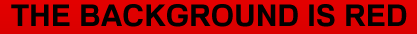
<style>
.page{position:relative;width:417px;height:34px;background:#010101}
.page>*{position:absolute;margin:0}
.t1{font:30px "FamiliarPro-Bold";color:#010101}
</style>
<div class="page">
<p class="t1" style="left:11px;top:4px;width:396px;height:23px">THE BACKGROUND IS RED</p>
</div>
